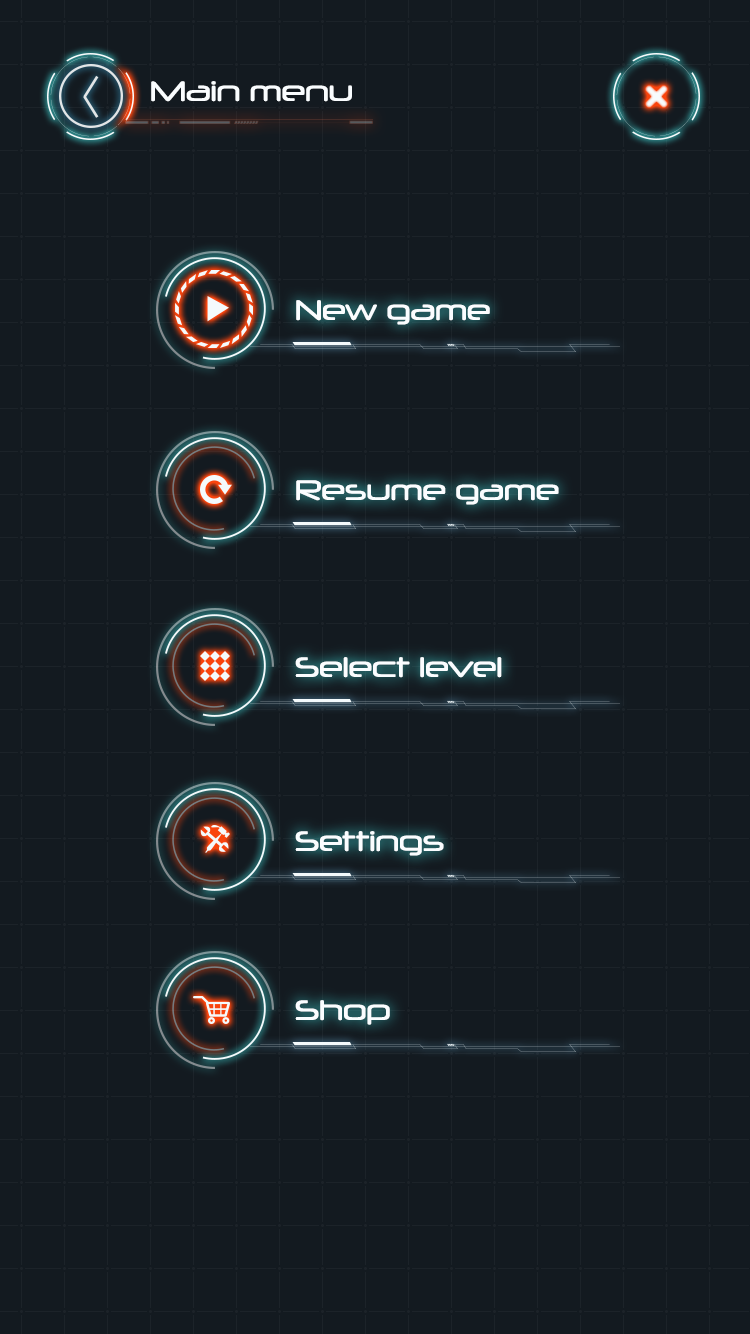
<style>
.page{position:relative;width:750px;height:1334px;background:#131a20}
.page>*{position:absolute;margin:0}
.t1{font:27.2px "Neuropol-Regular";color:#fafdff}
</style>
<div class="page">
<p class="t1" style="left:151px;top:81px;width:201px;height:21px">Main menu</p>
<p class="t1" style="left:296px;top:300px;width:194px;height:25px">New game</p>
<p class="t1" style="left:296px;top:480px;width:263px;height:25px">Resume game</p>
<p class="t1" style="left:295px;top:657px;width:207px;height:21px">Select level</p>
<p class="t1" style="left:295px;top:831px;width:149px;height:25px">Settings</p>
<p class="t1" style="left:295px;top:1000px;width:95px;height:25px">Shop</p>
</div>
